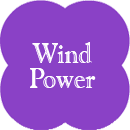
<style>
.page{position:relative;width:130px;height:130px;background:#8a41c6}
.page>*{position:absolute;margin:0}
.t1{font:28.1px/24.8px "GoudyHandtooledBT-Regular";color:#ffffff;scale:0.9 1}
</style>
<div class="page">
<p class="t1" style="left:30px;top:42px;width:66px;height:46px;text-align:center">Wind<br>Power</p>
</div>
